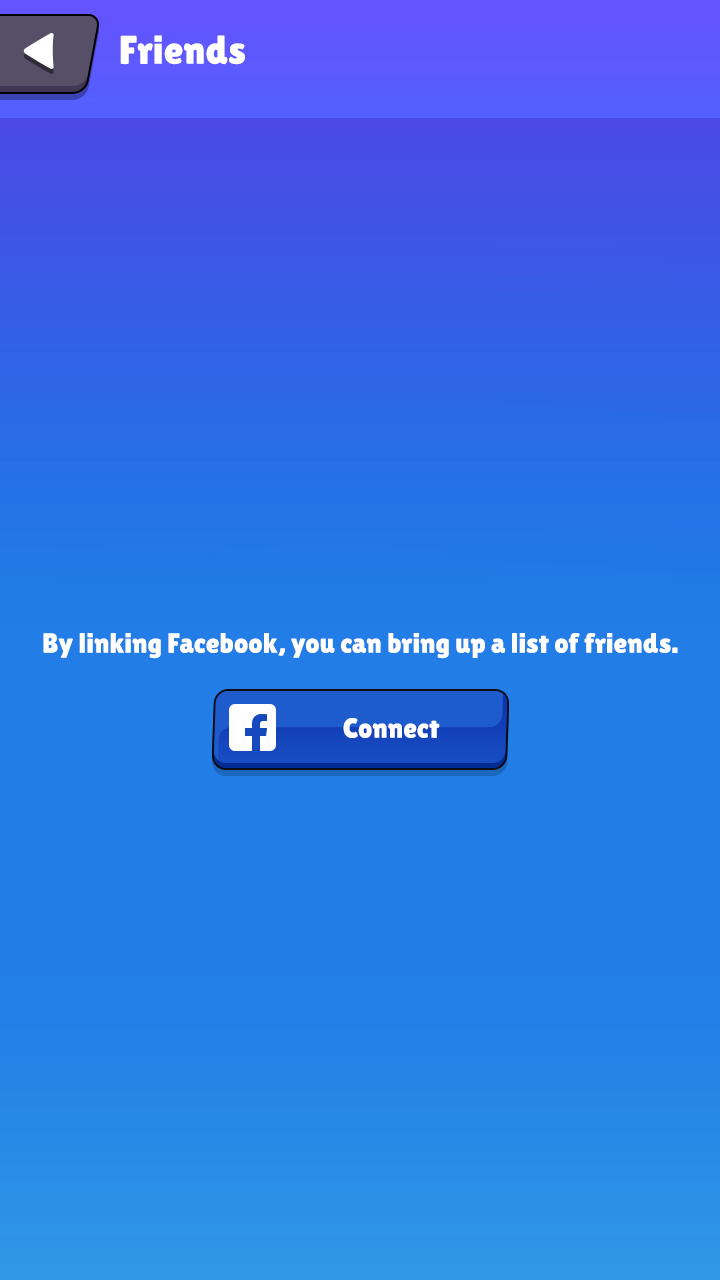
<style>
.page{position:relative;width:720px;height:1280px;background:#227de6}
.page>*{position:absolute;margin:0}
.t1{font:40px "LilitaOne";color:#ffffff}
.t2{font:28px "LilitaOne";color:#ffffff}
</style>
<div class="page">
<p class="t1" style="left:120px;top:35px;width:125px;height:30px">Friends</p>
<p class="t2" style="left:43px;top:633px;width:635px;height:26px">By linking Facebook, you can bring up a list of friends.</p>
<p class="t2" style="left:343px;top:718px;width:97px;height:20px">Connect</p>
</div>
